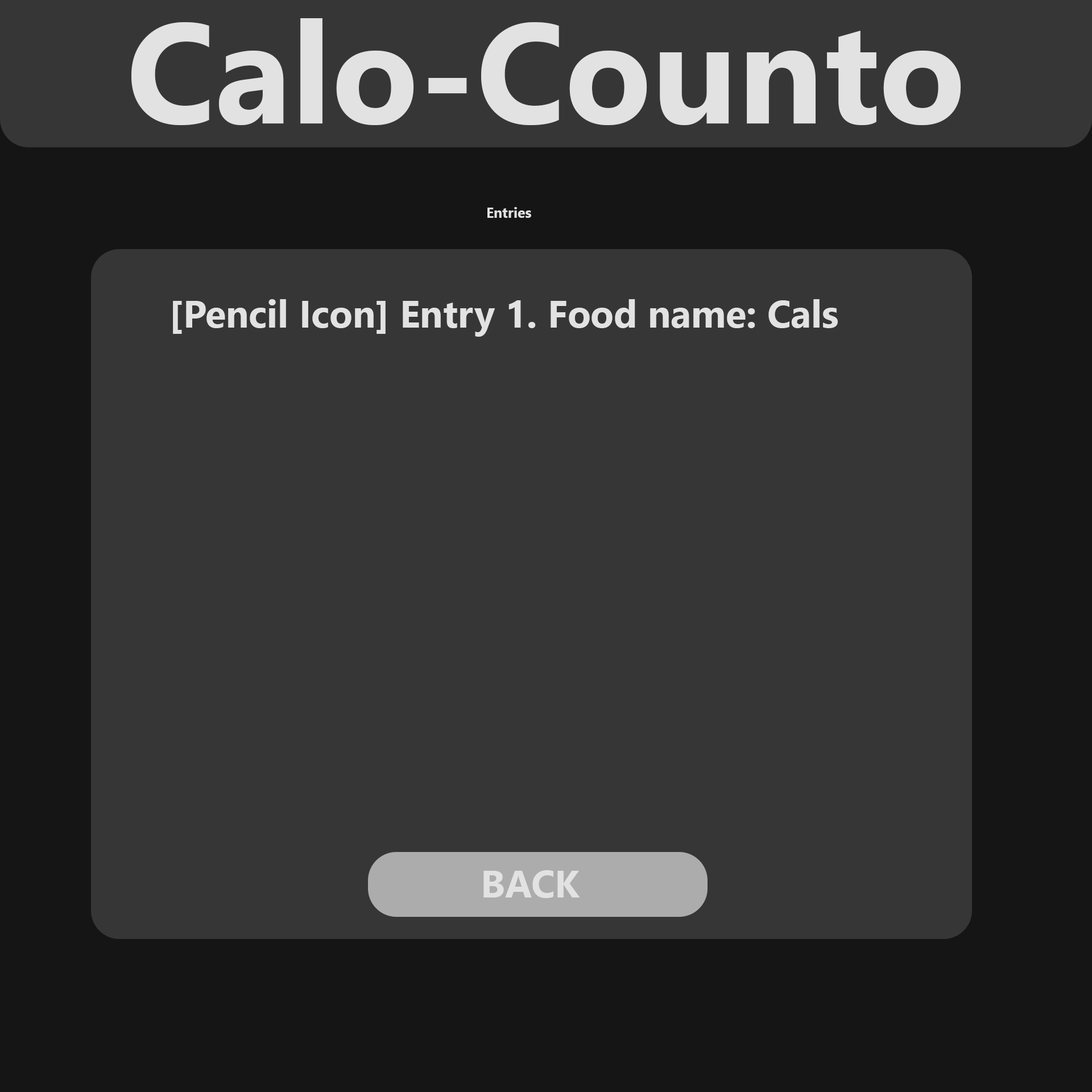
<style>
.page{position:relative;width:1092px;height:1092px;background:#363636}
.page>*{position:absolute;margin:0}
.t1{font:142.2px "SegoeUI-Bold";color:#e2e2e2}
.t2{font:14.2px "SegoeUI-Bold";color:#e2e2e2}
.t3{font:37.9px "SegoeUI-Bold";color:#e2e2e2}
</style>
<div class="page">
<p class="t1" style="left:131px;top:18px;width:830px;height:107px">Calo-Counto</p>
<p class="t2" style="left:487px;top:207px;width:44px;height:11px">Entries</p>
<p class="t3" style="left:173px;top:299px;width:665px;height:38px">[Pencil Icon] Entry 1. Food name: Cals</p>
<p class="t3" style="left:483px;top:870px;width:97px;height:28px">BACK</p>
</div>
